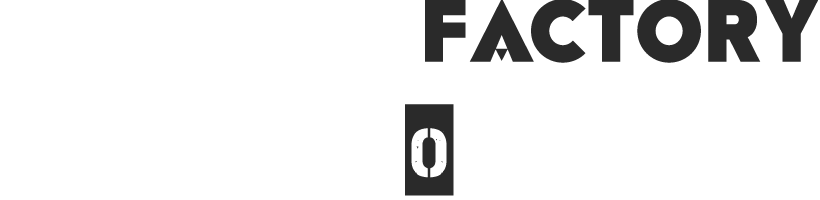
<style>
.page{position:relative;width:820px;height:200px;background:#ffffff}
.page>*{position:absolute;margin:0}
.t1{font:88px "RAINFALL-Black";color:#2a2a2a}
.t2{font:88.1px "TakeCover";color:#2a2a2a}
</style>
<div class="page">
<p class="t1" style="left:425px;top:0px;width:393px;height:63px">Factory</p>
<p class="t2" style="left:405px;top:104px;width:49px;height:92px">0</p>
</div>
